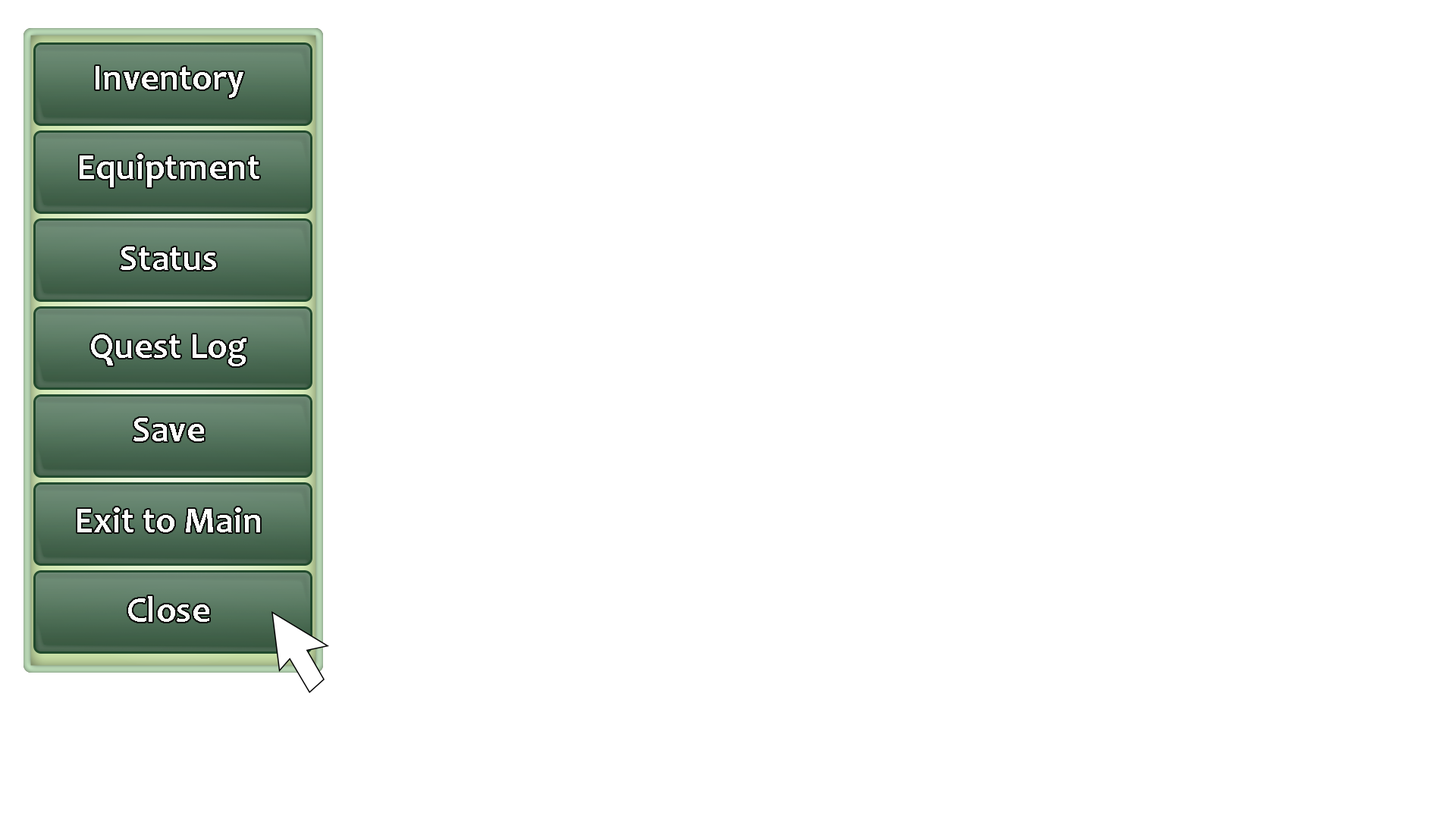
<style>
.page{position:relative;width:1456px;height:819px;background:#ffffff}
.page>*{position:absolute;margin:0}
.t1{font:36.4px "Candara-Bold";color:#ffffff}
</style>
<div class="page">
<p class="t1" style="left:96px;top:66px;width:147px;height:32px">Inventory</p>
<p class="t1" style="left:80px;top:154px;width:179px;height:33px">Equiptment</p>
<p class="t1" style="left:121px;top:246px;width:95px;height:24px">Status</p>
<p class="t1" style="left:91px;top:334px;width:155px;height:32px">Quest Log</p>
<p class="t1" style="left:133px;top:418px;width:71px;height:23px">Save</p>
<p class="t1" style="left:77px;top:507px;width:183px;height:25px">Exit to Main</p>
<p class="t1" style="left:128px;top:596px;width:81px;height:26px">Close</p>
</div>
